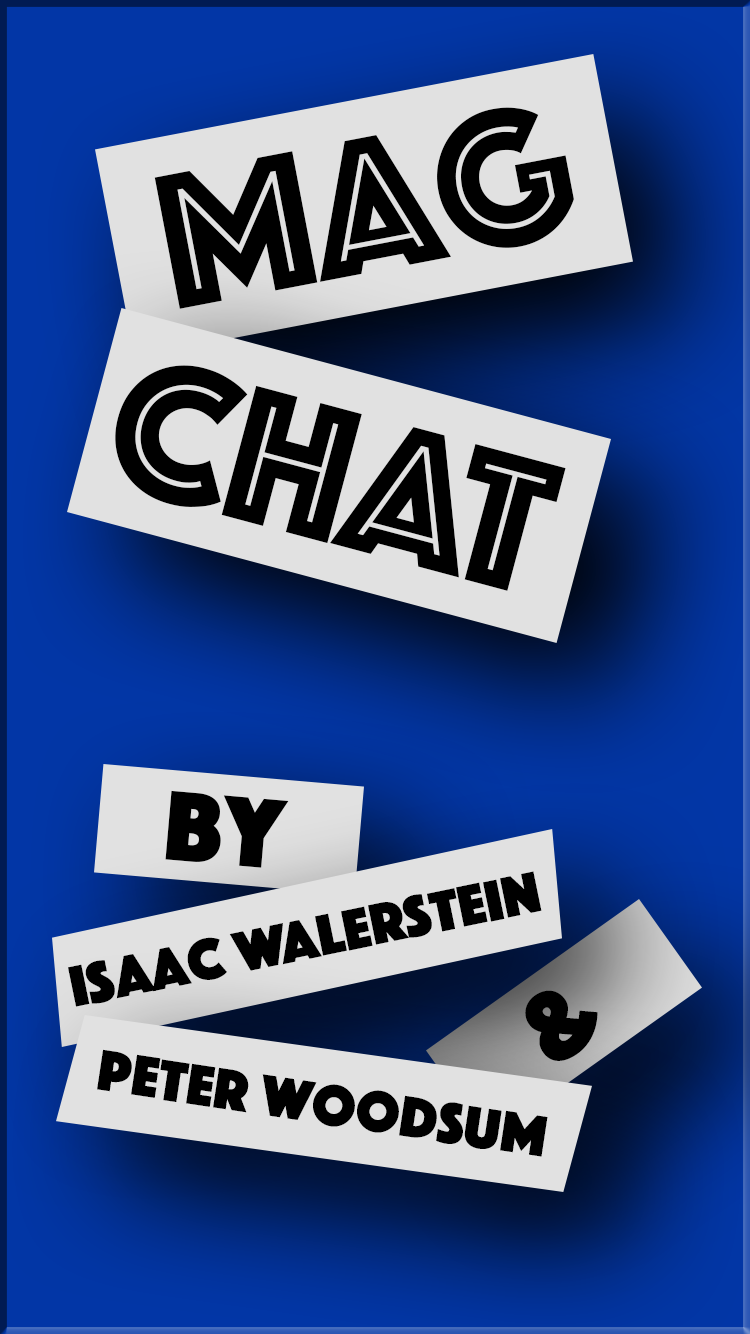
<style>
.page{position:relative;width:750px;height:1334px;background:#e1e1e1}
.page>*{position:absolute;margin:0}
.t1{font:200px "Phosphate-Inline";color:#000000}
.t2{font:103px "Phosphate-Solid";color:#000000}
.t3{font:60px "Phosphate-Solid";color:#000000}
</style>
<div class="page">
<p class="t1" style="left:154px;top:107px;width:420px;height:202px;rotate:-11deg">Mag</p>
<p class="t1" style="left:115px;top:365px;width:451px;height:226px;rotate:15deg">CHAT</p>
<p class="t2" style="left:165px;top:790px;width:124px;height:78px;rotate:5deg">By</p>
<p class="t3" style="left:68px;top:871px;width:474px;height:136px;rotate:-12deg">Isaac Walerstein</p>
<p class="t2" style="left:525px;top:990px;width:73px;height:71px;rotate:-35deg">&amp;</p>
<p class="t3" style="left:97px;top:1049px;width:451px;height:108px;rotate:9deg">Peter Woodsum</p>
</div>
